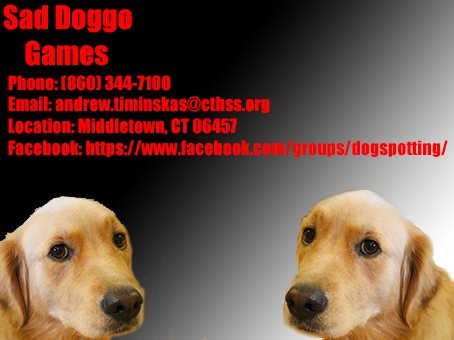
<style>
.page{position:relative;width:454px;height:340px}
.page>*{position:absolute;margin:0}
.t1{font:30px "Impact";color:#ff0000}
.t2{font:18px "Impact";color:#ff0000}
</style>
<div class="page">
<p class="t1" style="left:3px;top:4px;width:129px;height:62px">Sad Doggo<br>    Games</p>
<p class="t2" style="left:8px;top:75px;width:440px;height:82px">Phone: (860) 344-7100<br>Email: andrew.timinskas@cthss.org<br>Location: Middletown, CT 06457<br>Facebook: https://www.facebook.com/groups/dogspotting/</p>
</div>
